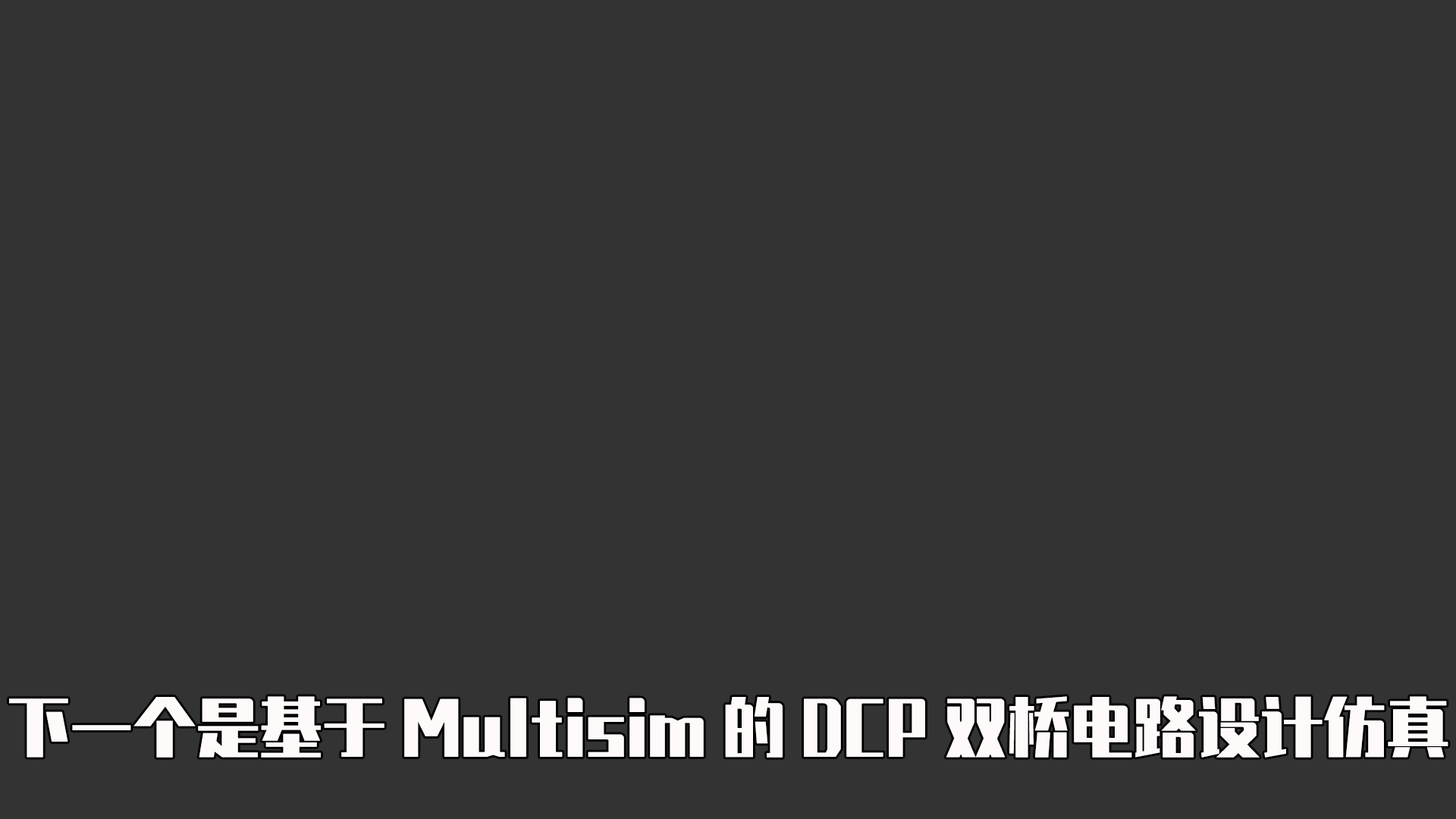
<style>
.page{position:relative;width:1456px;height:819px;background:#333333}
.page>*{position:absolute;margin:0}
.t1{font:63.2px "ZhenyanGB-Regular";color:#fefafa}
</style>
<div class="page">
<p class="t1" style="left:9px;top:696px;width:1439px;height:62px">下一个是基于Multisim的DCP双桥电路设计仿真</p>
</div>
